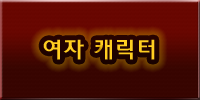
<style>
.page{position:relative;width:200px;height:100px}
.page>*{position:absolute;margin:0}
.t1{font:24px "2002L";letter-spacing:0.05em;color:#ffce21}
</style>
<div class="page">
<p class="t1" style="left:43px;top:39px;width:112px;height:21px">여자 캐릭터</p>
</div>
